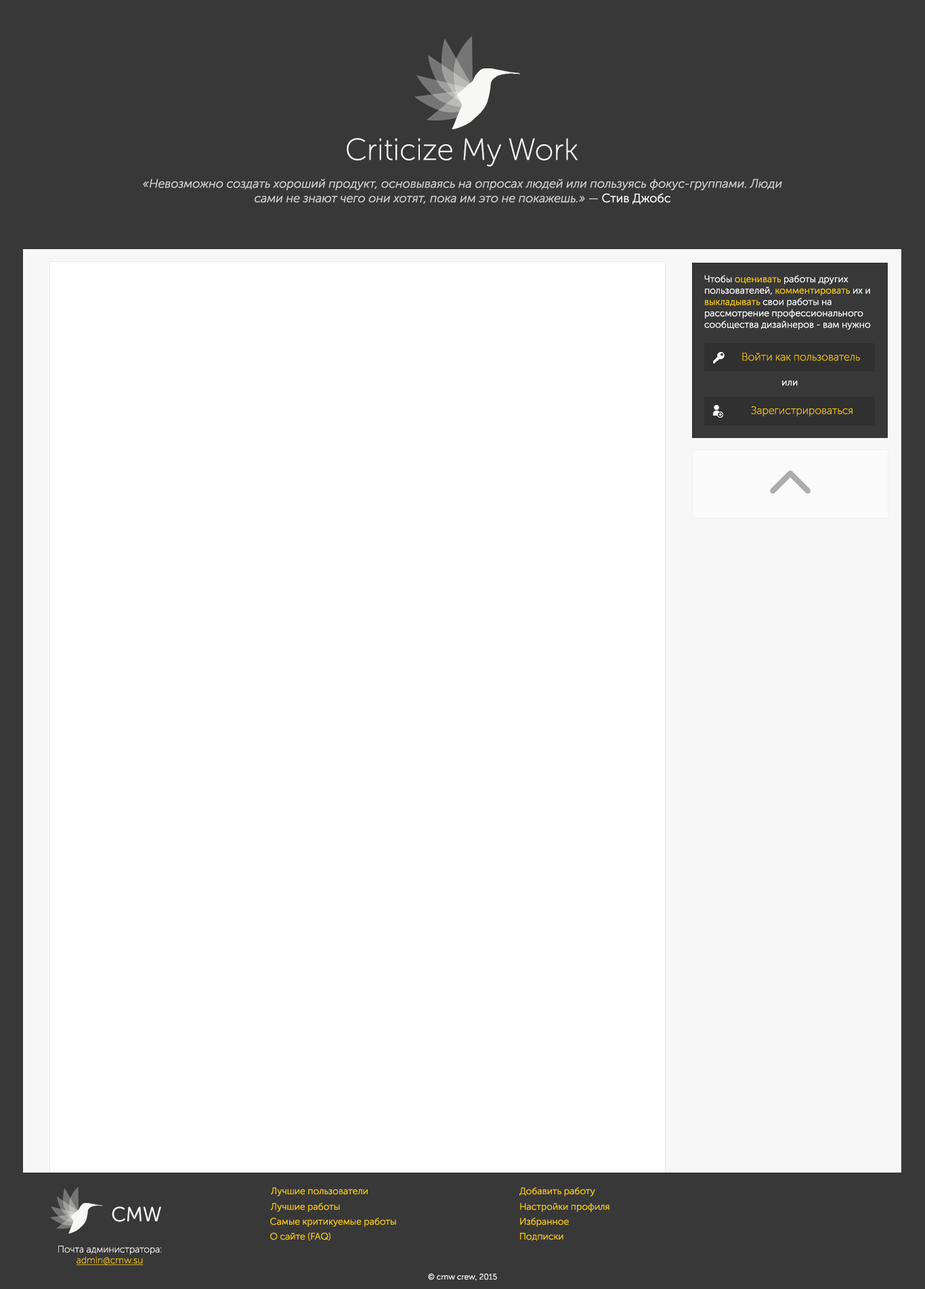
<style>
.page{position:relative;width:925px;height:1289px;background:#ffffff}
.page>*{position:absolute;margin:0}
.t1{font:30.5px "MuseoSansCyrl-100";color:#f7f7f5}
.t2{font:12.2px "MuseoSansCyrl-300Italic";color:#cfcfcc}
.t3{font:12.2px "MuseoSansCyrl-300";color:#cfcfcc}
.t4{font:12.2px "MuseoSansCyrl-300";color:#ffffff}
.t5{font:9.5px "MuseoSansCyrl-300";color:#f7f7f7}
.t6{font:9.5px "MuseoSansCyrl-300";color:#f1c40f}
.t7{font:10.8px "MuseoSansCyrl-100";color:#f1c40f}
.t8{font:20.3px "MuseoSansCyrl-300";color:#f7f7f5}
.t9{font:9.5px "MuseoSansCyrl-100";color:#f7f7f7}
.t10{font:9.5px "MuseoSansCyrl-100";color:#f1c40f;text-decoration:underline}
.t11{font:8.1px "MuseoSansCyrl-300";color:#f7f7f5}
</style>
<div class="page">
<p class="t1" style="left:347px;top:138px;width:231px;height:29px">Criticize My Work</p>
<p class="t2" style="left:143px;top:179px;width:639px;height:25px;text-align:center">«Невозможно создать хороший продукт, основываясь на опросах людей или пользуясь фокус-группами. Люди сами не знают чего они хотят, пока им это не покажешь.» <span class="t3">— </span><span class="t4">Стив Джобс</span></p>
<p class="t5" style="left:704px;top:275px;width:167px;height:55px;text-align:right">Чтобы <span class="t6">оценивать</span> работы других пользователей, <span class="t6">комментировать</span> их и <span class="t6">выкладывать</span> свои работы на рассмотрение профессионального сообщества дизайнеров - вам нужно</p>
<p class="t7" style="left:742px;top:353px;width:118px;height:8px">Войти как пользователь</p>
<p class="t5" style="left:782px;top:381px;width:16px;height:5px">или</p>
<p class="t7" style="left:751px;top:406px;width:101px;height:10px">Зарегистрироваться</p>
<p class="t6" style="left:271px;top:1188px;width:97px;height:8px">Лучшие пользователи</p>
<p class="t6" style="left:519px;top:1187px;width:76px;height:9px">Добавить работу</p>
<p class="t6" style="left:270px;top:1203px;width:70px;height:9px">Лучшие работы</p>
<p class="t6" style="left:520px;top:1203px;width:89px;height:9px">Настройки профиля</p>
<p class="t8" style="left:112px;top:1207px;width:49px;height:15px">CMW</p>
<p class="t6" style="left:270px;top:1217px;width:126px;height:10px">Самые критикуемые работы</p>
<p class="t6" style="left:520px;top:1217px;width:49px;height:10px">Избранное</p>
<p class="t6" style="left:270px;top:1232px;width:60px;height:9px">О сайте (FAQ)</p>
<p class="t6" style="left:520px;top:1233px;width:43px;height:8px">Подписки</p>
<p class="t9" style="left:58px;top:1246px;width:104px;height:9px">Почта администратора:</p>
<p class="t10" style="left:76px;top:1257px;width:68px;height:9px">admin@cmw.su</p>
<p class="t11" style="left:428px;top:1274px;width:69px;height:7px">© cmw crew, 2015</p>
</div>
